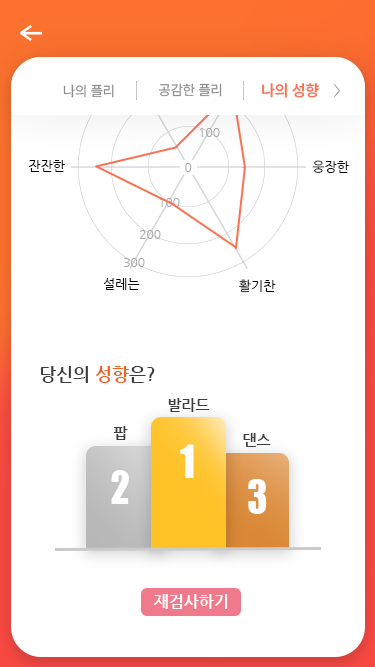
<style>
.page{position:relative;width:375px;height:667px;background:#ffffff}
.page>*{position:absolute;margin:0}
.t1{font:14.4px "PretendardVariable-Regular";color:#8c8c8c}
.t2{font:16px "PretendardVariable-SemiBold";color:#f77354}
.t3{font:12px "NanumGothic";color:#ababab}
.t4{font:13px "NanumGothic";color:#000000}
.t5{font:18px "NanumGothicBold";color:#3d3d3d}
.t6{font:18px "NanumGothicBold";color:#ed6123}
.t7{font:15px "NanumGothicBold";color:#3d3d3d}
.t8{font:50px "JCHEadA";color:#fefefe}
.t9{font:16px "NanumGothicBold";color:#ffffff}
</style>
<div class="page">
<p class="t1" style="left:63px;top:84px;width:51px;height:14px">나의 플리</p>
<p class="t1" style="left:158px;top:83px;width:64px;height:14px">공감한 플리</p>
<p class="t2" style="left:262px;top:83px;width:57px;height:15px">나의 성향</p>
<p class="t3" style="left:199px;top:128px;width:21px;height:9px">100</p>
<p class="t4" style="left:29px;top:160px;width:36px;height:12px">잔잔한</p>
<p class="t4" style="left:312px;top:160px;width:37px;height:13px">웅장한</p>
<p class="t3" style="left:185px;top:163px;width:7px;height:9px">0</p>
<p class="t3" style="left:159px;top:198px;width:21px;height:9px">100</p>
<p class="t3" style="left:139px;top:230px;width:22px;height:9px">200</p>
<p class="t3" style="left:123px;top:258px;width:22px;height:9px">300</p>
<p class="t4" style="left:103px;top:278px;width:37px;height:12px">설레는</p>
<p class="t4" style="left:239px;top:279px;width:37px;height:14px">활기찬</p>
<p class="t5" style="left:40px;top:366px;width:115px;height:17px">당신의 <span class="t6">성향</span>은?</p>
<p class="t7" style="left:168px;top:398px;width:42px;height:14px">발라드</p>
<p class="t7" style="left:113px;top:426px;width:15px;height:14px">팝</p>
<p class="t7" style="left:243px;top:433px;width:28px;height:14px">댄스</p>
<p class="t8" style="left:180px;top:444px;width:14px;height:34px">1</p>
<p class="t8" style="left:111px;top:470px;width:18px;height:34px">2</p>
<p class="t8" style="left:248px;top:479px;width:19px;height:35px">3</p>
<p class="t9" style="left:153px;top:594px;width:75px;height:15px">재검사하기</p>
</div>
